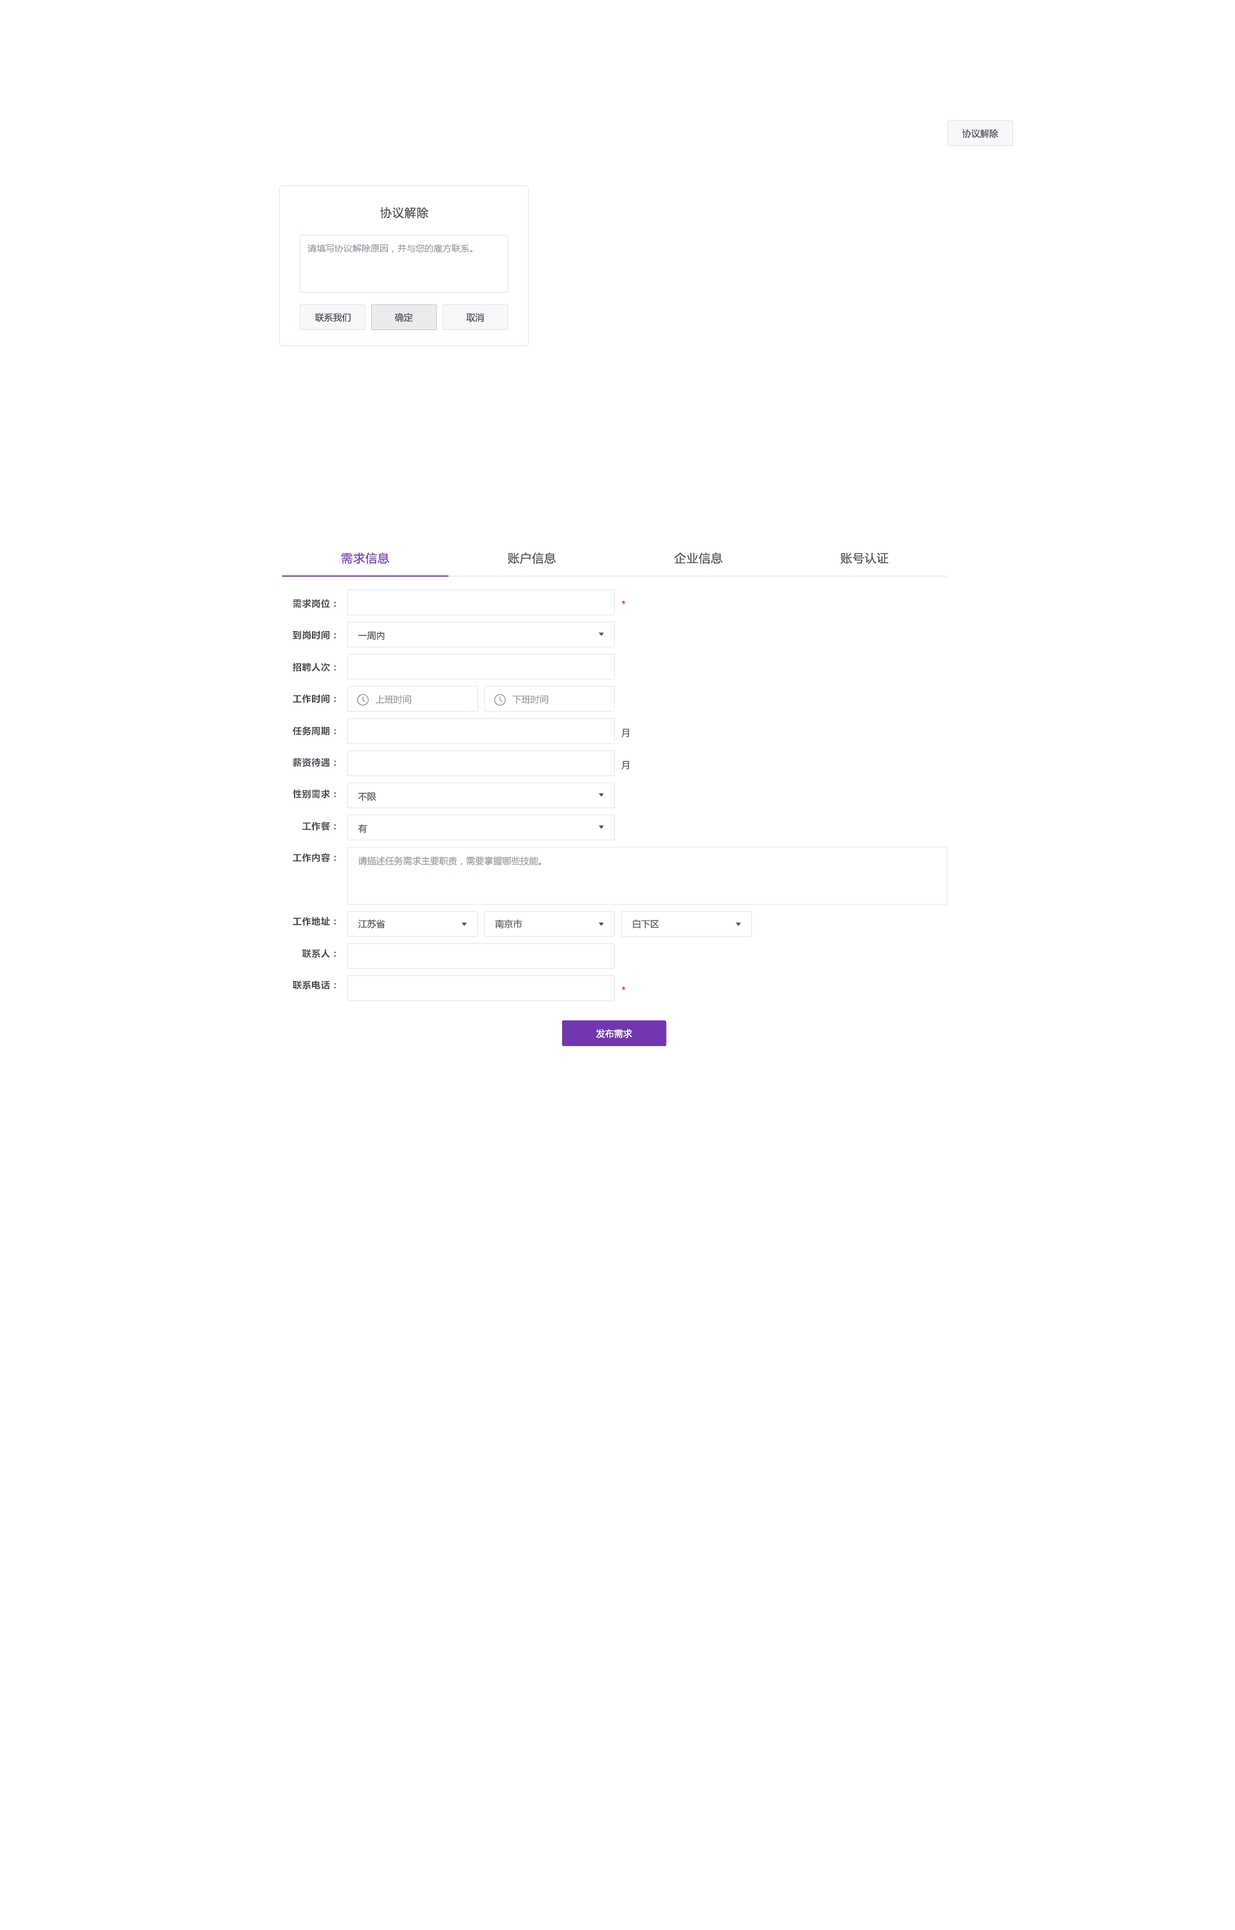
<style>
.page{position:relative;width:1235px;height:1930px;background:#ffffff}
.page>*{position:absolute;margin:0}
.t1{font:9px "MicrosoftYaHei";color:#4c4c54}
.t2{font:11.6px "MicrosoftYaHei";letter-spacing:0.05em;color:#4c4c54}
.t3{font:9px "MicrosoftYaHei";color:#9199a0}
.t4{font:11.6px "MicrosoftYaHei";letter-spacing:0.05em;color:#7335b0}
.t5{font:9px/31.8px "MicrosoftYaHei-Bold";letter-spacing:0.05em;color:#4c4c54}
.t6{font:11.6px "ArialMT";letter-spacing:0.05em;color:#ff0000}
.t7{font:9px "MicrosoftYaHei";letter-spacing:0.05em;color:#4c4c54}
.t8{font:9px "MicrosoftYaHei";color:#ffffff}
</style>
<div class="page">
<p class="t1" style="left:962px;top:129px;width:36px;height:9px">协议解除</p>
<p class="t2" style="left:380px;top:207px;width:48px;height:12px">协议解除</p>
<p class="t3" style="left:307px;top:244px;width:166px;height:9px">请填写协议解除原因，并与您的雇方联系。</p>
<p class="t1" style="left:315px;top:313px;width:36px;height:9px">联系我们</p>
<p class="t1" style="left:394px;top:313px;width:19px;height:9px">确定</p>
<p class="t1" style="left:466px;top:313px;width:18px;height:9px">取消</p>
<p class="t4" style="left:341px;top:552px;width:48px;height:12px">需求信息</p>
<p class="t2" style="left:507px;top:552px;width:49px;height:12px">账户信息</p>
<p class="t2" style="left:674px;top:552px;width:49px;height:12px">企业信息</p>
<p class="t2" style="left:840px;top:553px;width:48px;height:11px">账号认证</p>
<p class="t5" style="left:293px;top:599px;width:43px;height:390px;text-align:right">需求岗位：<br>到岗时间：<br>招聘人次：<br>工作时间：<br>任务周期：<br>薪资待遇：<br>性别需求：<br>工作餐：<br>工作内容：<br><br>工作地址：<br>联系人：<br>联系电话：</p>
<p class="t6" style="left:622px;top:601px;width:3px;height:3px">*</p>
<p class="t1" style="left:358px;top:631px;width:27px;height:9px">一周内</p>
<p class="t3" style="left:375px;top:695px;width:37px;height:9px">上班时间</p>
<p class="t3" style="left:512px;top:695px;width:37px;height:9px">下班时间</p>
<p class="t7" style="left:621px;top:728px;width:8px;height:9px">月</p>
<p class="t7" style="left:621px;top:760px;width:8px;height:9px">月</p>
<p class="t1" style="left:358px;top:792px;width:18px;height:9px">不限</p>
<p class="t1" style="left:358px;top:824px;width:9px;height:9px">有</p>
<p class="t3" style="left:358px;top:856px;width:184px;height:10px">请描述任务需求主要职责，需要掌握哪些技能。</p>
<p class="t1" style="left:358px;top:919px;width:27px;height:9px">江苏省</p>
<p class="t1" style="left:495px;top:919px;width:27px;height:9px">南京市</p>
<p class="t1" style="left:633px;top:919px;width:26px;height:9px">白下区</p>
<p class="t6" style="left:622px;top:987px;width:3px;height:3px">*</p>
<p class="t8" style="left:596px;top:1028px;width:36px;height:10px">发布需求</p>
</div>
